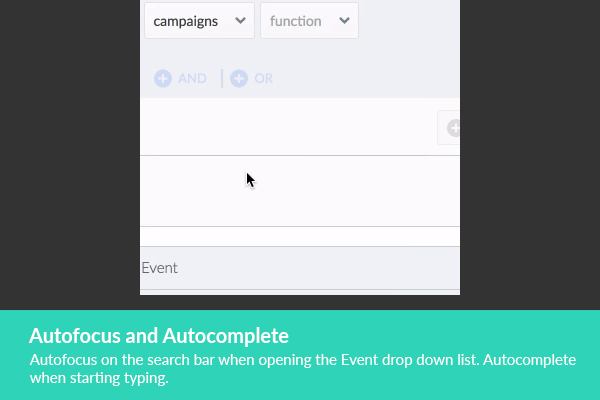
<style>
.page{position:relative;width:600px;height:400px;background:#333333}
.page>*{position:absolute;margin:0}
.t1{font:20px "Lato-Bold";color:#ffffff}
.t2{font:15px "Lato-Regular";color:#ffffff}
</style>
<div class="page">
<p class="t1" style="left:28px;top:327px;width:261px;height:20px">Autofocus and Autocomplete</p>
<p class="t2" style="left:29px;top:354px;width:547px;height:32px">Autofocus on the search bar when opening the Event drop down list. Autocomplete when starting typing.</p>
</div>
